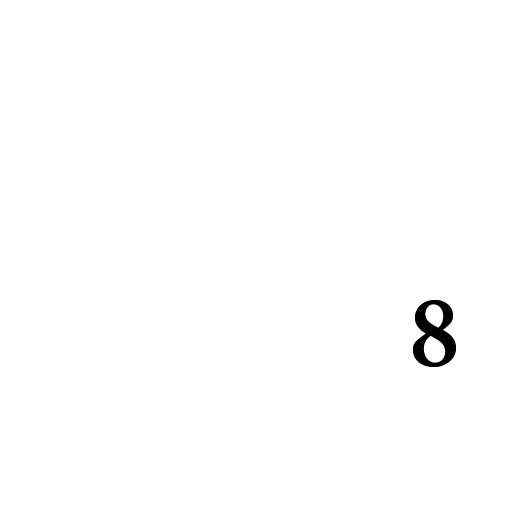
<style>
.page{position:relative;width:512px;height:512px;background:#ffffff}
.page>*{position:absolute;margin:0}
.t1{font:112px "AdobeGurmukhi-Bold";color:#000000}
</style>
<div class="page">
<p class="t1" style="left:413px;top:300px;width:43px;height:67px">8</p>
</div>
